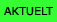
<style>
.page{position:relative;width:57px;height:22px;background:#33ff33}
.page>*{position:absolute;margin:0}
.t1{font:11px "Verdana";color:#000000}
</style>
<div class="page">
<p class="t1" style="left:4px;top:7px;width:49px;height:9px">AKTUELT</p>
</div>
